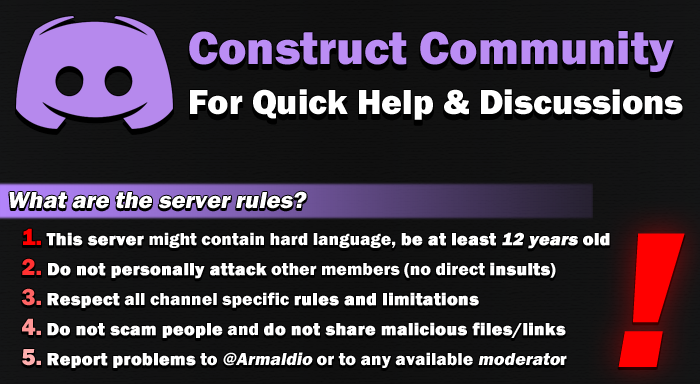
<style>
.page{position:relative;width:700px;height:384px}
.page>*{position:absolute;margin:0}
.t1{font:24px "FranklinGothic-Heavy";color:#ffffff;font-style:italic}
.t2{font:18px/30px "FranklinGothic-Heavy";color:#ffffff;font-weight:bold}
.t3{font:24px/30px "FranklinGothic-Heavy";color:#ff0000}
.t4{font:18px/30px "FranklinGothic-Heavy";color:#ffffff}
.t5{font:18px/30px "FranklinGothic-Heavy";color:#ffffff;font-weight:bold;font-style:italic}
.t6{font:24px/30px "FranklinGothic-Heavy";color:#ff3232}
.t7{font:24px/30px "FranklinGothic-Heavy";color:#ff6464}
.t8{font:24px/30px "FranklinGothic-Heavy";color:#ff9696}
.t9{font:24px/30px "FranklinGothic-Heavy";color:#ffafaf}
.t10{font:18px/30px "FranklinGothic-Heavy";color:#ffffff;font-style:italic}
.t11{font:200px "FranklinGothic-Heavy";color:#ff0000;font-style:italic}
</style>
<div class="page">
<p class="t1" style="left:9px;top:191px;width:298px;height:18px">What are the server rules?</p>
<p class="t2" style="left:21px;top:228px;width:589px;height:140px"><span class="t3">1. </span>This server<span class="t4"> might contain hard language, </span>be at least <span class="t5">12 years</span> old<br><span class="t6">2. </span>Do not personally attack<span class="t4"> other members (no direct </span>insults<span class="t4">)<br></span><span class="t7">3. </span>Respect<span class="t4"> all channel specific </span>rules and limitations<br><span class="t8">4. </span>Do not scam people<span class="t4"> and </span>do not share malicious files/links<br><span class="t9">5. </span>Report problems<span class="t4"> to </span><span class="t10">@Armaldio</span><span class="t4"> or to any available </span><span class="t10">moderato</span><span class="t4">r</span></p>
<p class="t11" style="left:618px;top:233px;width:67px;height:134px">!</p>
</div>
